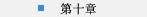
<style>
.page{position:relative;width:147px;height:17px;background:#f1f1f1}
.page>*{position:absolute;margin:0}
.t1{font:12px "SimSun";color:#000000;font-weight:bold}
</style>
<div class="page">
<p class="t1" style="left:40px;top:0px;width:77px;height:18px">第十章</p>
</div>
